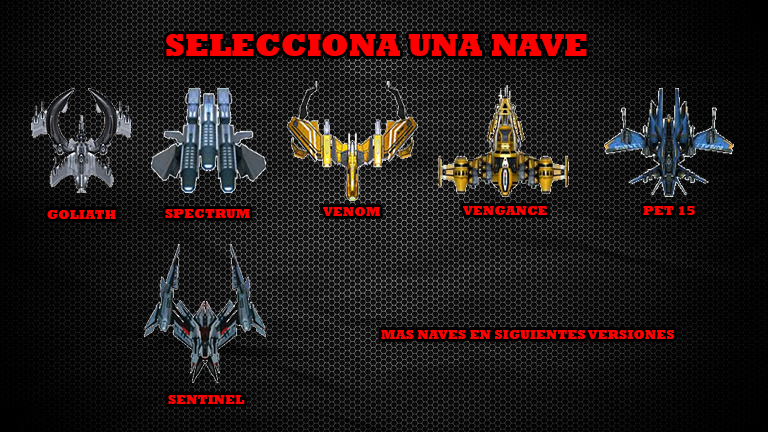
<style>
.page{position:relative;width:768px;height:432px}
.page>*{position:absolute;margin:0}
.t1{font:32px "Rockwell-ExtraBold";color:#ff0000}
.t2{font:13.3px "Rockwell-ExtraBold";color:#ff0000}
</style>
<div class="page">
<p class="t1" style="left:166px;top:34px;width:421px;height:22px">SELECCIONA UNA NAVE</p>
<p class="t2" style="left:165px;top:209px;width:85px;height:9px">SPECTRUM</p>
<p class="t2" style="left:323px;top:207px;width:57px;height:9px">VENOM</p>
<p class="t2" style="left:463px;top:206px;width:84px;height:9px">VENGANCE</p>
<p class="t2" style="left:643px;top:206px;width:52px;height:9px">PET 15</p>
<p class="t2" style="left:47px;top:210px;width:69px;height:9px">GOLIATH</p>
<p class="t2" style="left:381px;top:330px;width:294px;height:9px">MAS NAVES EN SIGUIENTES VERSIONES</p>
<p class="t2" style="left:168px;top:395px;width:77px;height:9px">SENTINEL</p>
</div>
